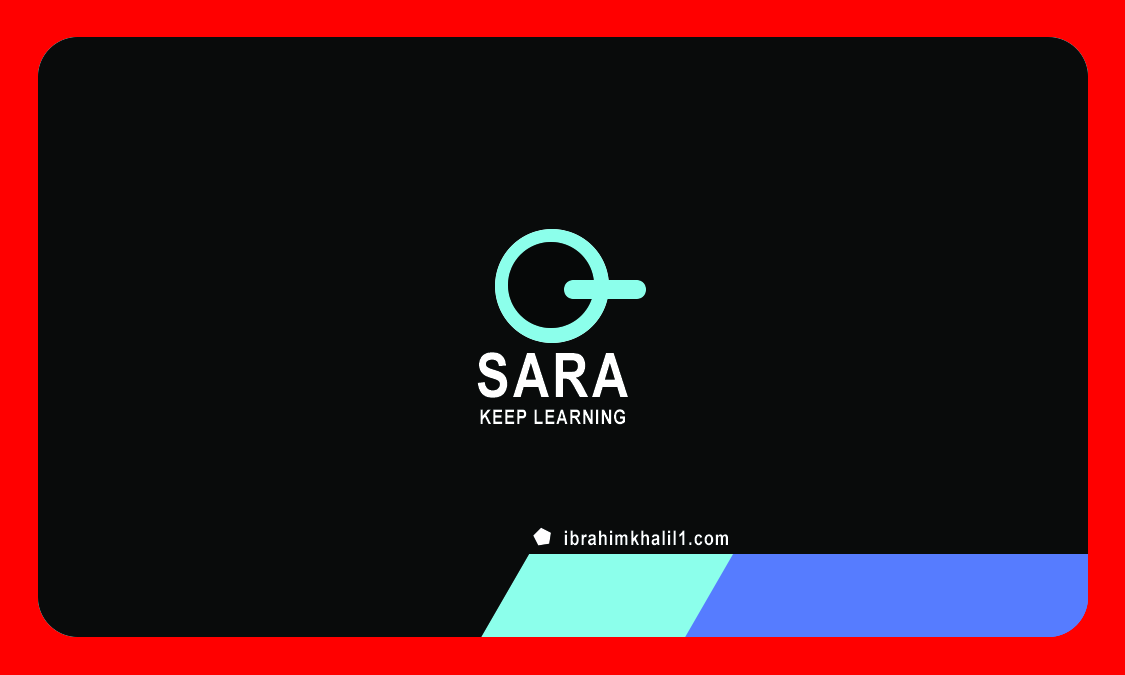
<style>
.page{position:relative;width:1125px;height:675px;background:#090b0b}
.page>*{position:absolute;margin:0}
.t1{font:61.3px "Arial-BoldMT";letter-spacing:0.06em;color:#ffffff;scale:0.82 1}
.t2{font:20px "Arial-BoldMT";letter-spacing:0.06em;color:#ffffff;scale:0.82 1}
.t3{font:20px "Arial-BoldMT";letter-spacing:0.06em;color:#fdfeff;scale:0.82 1}
</style>
<div class="page">
<p class="t1" style="left:477px;top:352px;width:151px;height:46px">SARA</p>
<p class="t2" style="left:480px;top:409px;width:145px;height:16px">KEEP LEARNING</p>
<p class="t3" style="left:564px;top:530px;width:164px;height:16px">ibrahimkhalil1.com</p>
</div>
